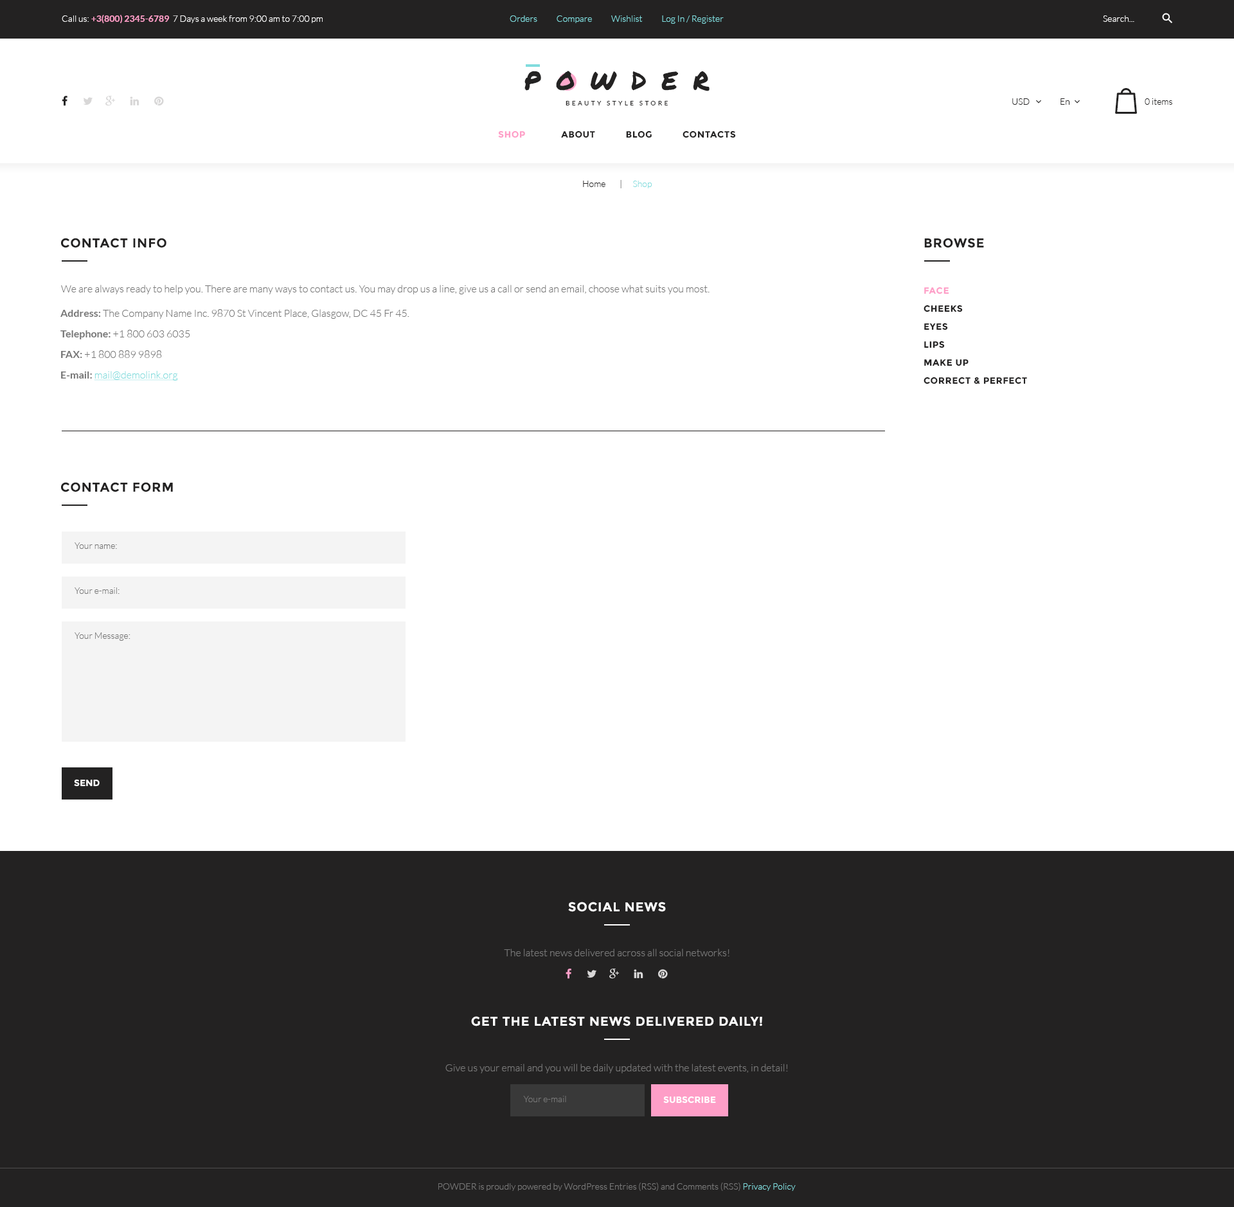
<style>
.page{position:relative;width:1234px;height:1207px;background:#ffffff}
.page>*{position:absolute;margin:0}
.t1{font:9px "Lato-Light";color:#ffffff}
.t2{font:9px "Lato-Bold";color:#fe9ec7}
.t3{font:9px "Lato-Light";color:#81dcdd}
.t4{font:25.7px "PermanentMarker";letter-spacing:0.6em;color:#232222;text-transform:uppercase}
.t5{font:6.4px "Lato-Regular";letter-spacing:0.34em;color:#232222;text-transform:uppercase}
.t6{font:9px "Lato-Light";color:#232222}
.t7{font:9px "Montserrat-Bold";letter-spacing:0.04em;color:#232222;text-transform:uppercase}
.t8{font:9px "Montserrat-Bold";letter-spacing:0.04em;color:#fe9ec7;text-transform:uppercase}
.t9{font:12.9px "Montserrat-Bold";letter-spacing:0.04em;color:#232222;text-transform:uppercase}
.t10{font:10.3px "Lato-Light";color:#777777}
.t11{font:9px/18px "Montserrat-Bold";letter-spacing:0.04em;color:#232222;text-transform:uppercase}
.t12{font:9px/18px "Montserrat-Bold";letter-spacing:0.04em;color:#fe9ec7;text-transform:uppercase}
.t13{font:10.3px/20.6px "Lato-Light";color:#777777}
.t14{font:10.3px/20.6px "Lato-Bold";color:#777777}
.t15{font:10.3px/20.6px "Lato-Light";color:#81dcdd;text-decoration:underline}
.t16{font:9px "Lato-Light";color:#777777}
.t17{font:9px "Montserrat-Bold";color:#ffffff;text-transform:uppercase}
.t18{font:12.9px "Montserrat-Bold";letter-spacing:0.04em;color:#ffffff;text-transform:uppercase}
.t19{font:9px "Lato-Light";color:#777777;text-transform:uppercase}
</style>
<div class="page">
<p class="t1" style="left:62px;top:15px;width:261px;height:9px">Call us: <span class="t2">+3(800) 2345-6789 </span> 7 Days a week from 9:00 am to 7:00 pm</p>
<p class="t3" style="left:510px;top:15px;width:214px;height:9px">Orders           Compare           Wishlist           Log In / Register</p>
<p class="t1" style="left:1103px;top:15px;width:32px;height:7px">Search...</p>
<p class="t4" style="left:525px;top:71px;width:185px;height:20px">powder</p>
<p class="t5" style="left:566px;top:101px;width:102px;height:4px">Beauty Style Store</p>
<p class="t6" style="left:1013px;top:98px;width:17px;height:7px">USD</p>
<p class="t6" style="left:1061px;top:98px;width:9px;height:7px">En</p>
<p class="t6" style="left:1145px;top:98px;width:28px;height:7px">0 items</p>
<p class="t7" style="left:498px;top:130px;width:238px;height:8px"><span class="t8">Shop      </span>       About           Blog           Contacts</p>
<p class="t6" style="left:583px;top:180px;width:69px;height:8px">Home        |      <span class="t3">Shop</span></p>
<p class="t9" style="left:61px;top:238px;width:105px;height:10px">Contact info</p>
<p class="t9" style="left:924px;top:238px;width:60px;height:10px">Browse</p>
<p class="t10" style="left:61px;top:285px;width:649px;height:9px">We are always ready to help you. There are many ways to contact us. You may drop us a line, give us a call or send an email, choose what suits you most.</p>
<p class="t11" style="left:924px;top:287px;width:103px;height:97px"><span class="t12">Face<br></span>CHEEKS<br>eyes<br>Lips<br>Make up<br>CORRECT &amp; PERFECT</p>
<p class="t13" style="left:60px;top:309px;width:350px;height:72px"><span class="t14">Address: </span>The Company Name Inc. 9870 St Vincent Place, Glasgow, DC 45 Fr 45.<br><span class="t14">Telephone: </span>+1 800 603 6035<br><span class="t14">FAX: </span>+1 800 889 9898<br><span class="t14">E-mail: </span><span class="t15">mail@demolink.org</span></p>
<p class="t9" style="left:61px;top:482px;width:112px;height:10px">Contact form</p>
<p class="t16" style="left:75px;top:543px;width:42px;height:6px">Your name:</p>
<p class="t16" style="left:75px;top:588px;width:45px;height:6px">Your e-mail:</p>
<p class="t16" style="left:75px;top:633px;width:55px;height:8px">Your Message:</p>
<p class="t17" style="left:74px;top:779px;width:26px;height:8px">Send</p>
<p class="t18" style="left:568px;top:902px;width:98px;height:10px">Social news</p>
<p class="t10" style="left:504px;top:949px;width:226px;height:8px">The latest news delivered across all social networks!</p>
<p class="t18" style="left:471px;top:1016px;width:291px;height:11px">Get the latest news delivered daily!</p>
<p class="t10" style="left:446px;top:1064px;width:342px;height:10px">Give us your email and you will be daily updated with the latest events, in detail!</p>
<p class="t16" style="left:523px;top:1096px;width:43px;height:6px">Your e-mail</p>
<p class="t17" style="left:663px;top:1096px;width:53px;height:8px">Subscribe</p>
<p class="t16" style="left:438px;top:1183px;width:358px;height:8px"><span class="t19">powder</span> is proudly powered by WordPress Entries (RSS) and Comments (RSS) <span class="t3">Privacy Policy</span></p>
</div>
